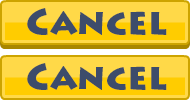
<style>
.page{position:relative;width:190px;height:100px;background:#ffd948}
.page>*{position:absolute;margin:0}
.t1{font:36px "LithosPro-Black";color:#3d4c6b}
</style>
<div class="page">
<p class="t1" style="left:27px;top:8px;width:140px;height:27px">Cancel</p>
<p class="t1" style="left:27px;top:63px;width:140px;height:27px">Cancel</p>
</div>
